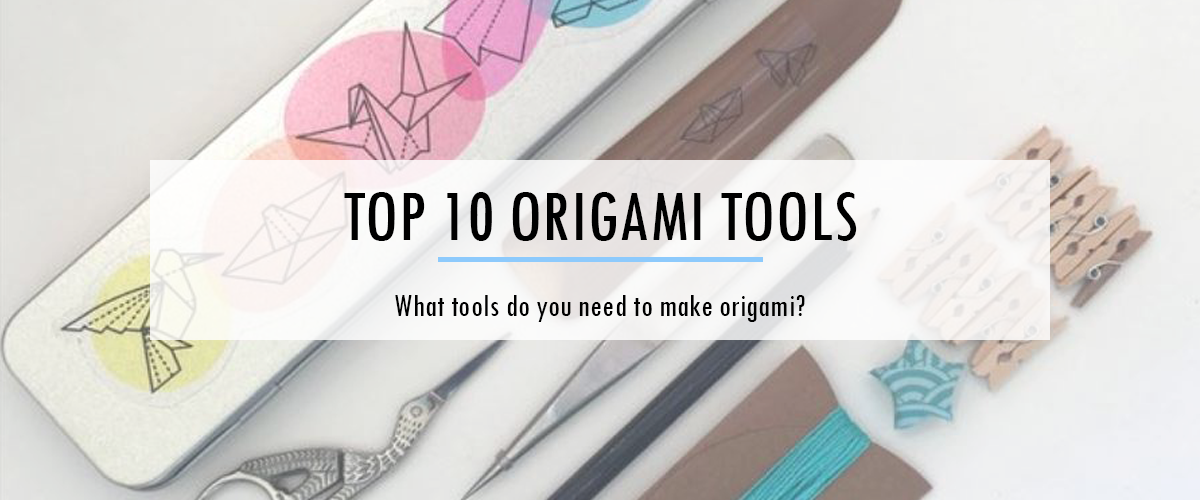
<style>
.page{position:relative;width:1200px;height:500px}
.page>*{position:absolute;margin:0}
.t1{font:75px "TwCenMT-Condensed";color:#000000}
.t2{font:33.3px "TwCenMT-Condensed";color:#000000}
</style>
<div class="page">
<p class="t1" style="left:344px;top:192px;width:513px;height:49px">TOP 10 ORIGAMI TOOLS</p>
<p class="t2" style="left:395px;top:295px;width:410px;height:27px">What tools do you need to make origami?</p>
</div>
